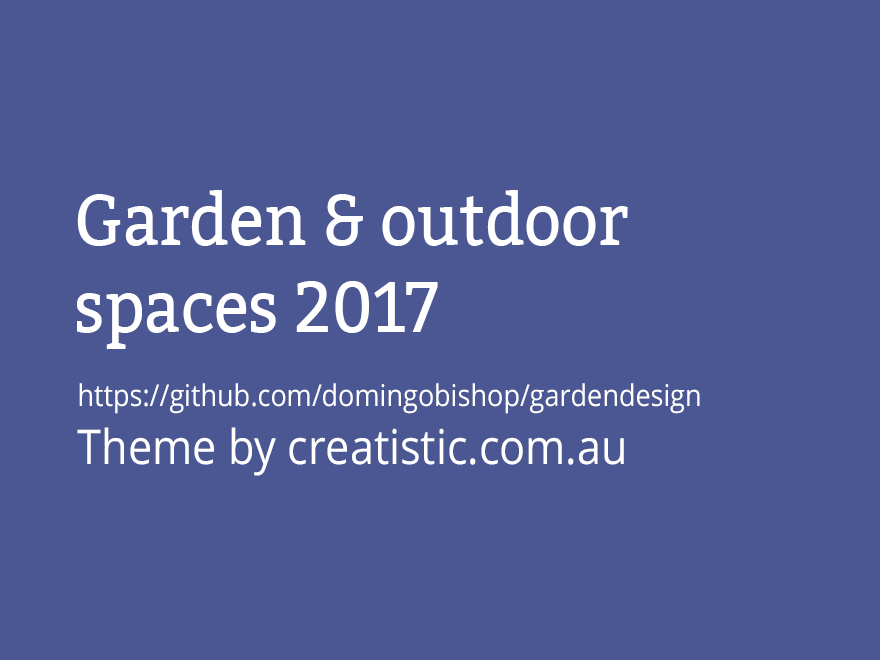
<style>
.page{position:relative;width:880px;height:660px;background:#4b5793}
.page>*{position:absolute;margin:0}
.t1{font:72px "Bitter-Regular";color:#ffffff;scale:0.9 1}
.t2{font:30px "OpenSans";color:#ffffff;scale:0.9 1}
.t3{font:48px "OpenSans";color:#ffffff;scale:0.9 1}
</style>
<div class="page">
<p class="t1" style="left:77px;top:190px;width:551px;height:159px">Garden &amp; outdoor <br>spaces 2017</p>
<p class="t2" style="left:77px;top:383px;width:623px;height:93px">https://github.com/domingobishop/gardendesign<br><span class="t3">Theme by creatistic.com.au</span></p>
</div>
